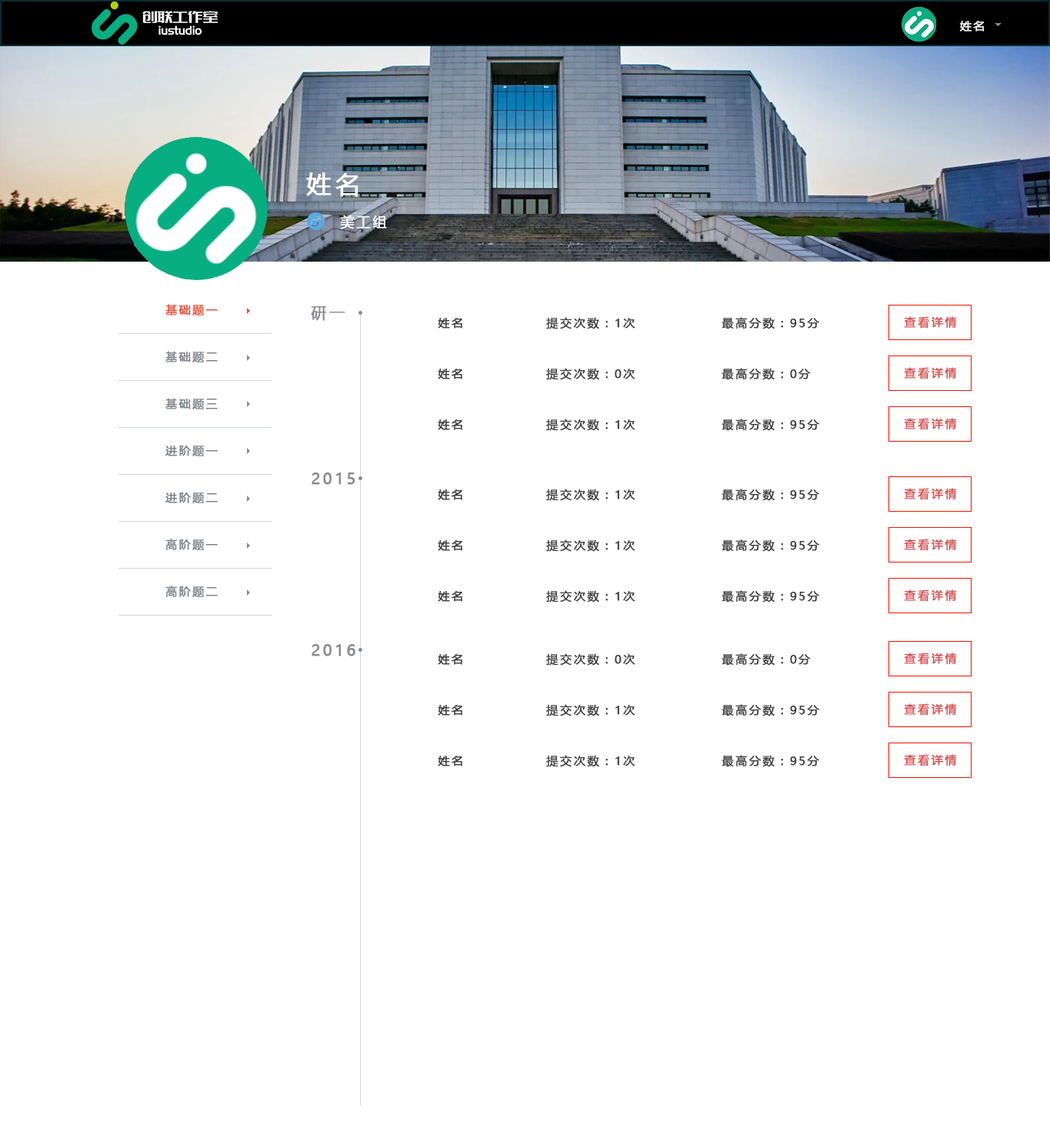
<style>
.page{position:relative;width:1050px;height:1135px;background:#ffffff}
.page>*{position:absolute;margin:0}
.t1{font:11.5px "MicrosoftYaHei";letter-spacing:0.14em;color:#eaeaea;font-weight:bold}
.t2{font:24.6px "MicrosoftYaHei";letter-spacing:0.14em;color:#ffffff;font-weight:bold}
.t3{font:13.9px "MicrosoftYaHei";letter-spacing:0.14em;color:#ffffff;font-weight:bold}
.t4{font:11.5px/47px "MicrosoftYaHei";letter-spacing:0.14em;color:#7f8489;font-weight:bold}
.t5{font:11.5px/47px "MicrosoftYaHei";letter-spacing:0.14em;color:#eb4f38;font-weight:bold}
.t6{font:15.4px "MicrosoftYaHei";letter-spacing:0.15em;color:#8a8c8f;font-weight:bold}
.t7{font:11.5px "MicrosoftYaHei";letter-spacing:0.15em;color:#414141;font-weight:bold}
.t8{font:11.5px "MicrosoftYaHei";letter-spacing:0.15em;color:#d85050;font-weight:bold}
</style>
<div class="page">
<p class="t1" style="left:960px;top:21px;width:25px;height:11px">姓名</p>
<p class="t2" style="left:306px;top:172px;width:53px;height:25px">姓名</p>
<p class="t3" style="left:340px;top:215px;width:47px;height:14px">美工组</p>
<p class="t4" style="left:165px;top:304px;width:53px;height:294px"><span class="t5">基础题一<br></span>基础题二<br>基础题三<br>进阶题一<br>进阶题二<br>高阶题一<br>高阶题二</p>
<p class="t6" style="left:311px;top:306px;width:35px;height:15px">研一</p>
<p class="t7" style="left:438px;top:318px;width:25px;height:11px">姓名</p>
<p class="t7" style="left:546px;top:317px;width:90px;height:12px">提交次数：1次</p>
<p class="t7" style="left:722px;top:317px;width:98px;height:12px">最高分数：95分</p>
<p class="t8" style="left:904px;top:316px;width:53px;height:13px">查看详情</p>
<p class="t7" style="left:438px;top:369px;width:25px;height:10px">姓名</p>
<p class="t7" style="left:546px;top:368px;width:90px;height:12px">提交次数：0次</p>
<p class="t7" style="left:722px;top:368px;width:89px;height:12px">最高分数：0分</p>
<p class="t8" style="left:904px;top:367px;width:53px;height:12px">查看详情</p>
<p class="t7" style="left:438px;top:419px;width:25px;height:11px">姓名</p>
<p class="t7" style="left:546px;top:419px;width:90px;height:12px">提交次数：1次</p>
<p class="t7" style="left:722px;top:419px;width:98px;height:12px">最高分数：95分</p>
<p class="t8" style="left:904px;top:418px;width:53px;height:12px">查看详情</p>
<p class="t6" style="left:312px;top:473px;width:44px;height:12px">2015</p>
<p class="t7" style="left:438px;top:489px;width:25px;height:11px">姓名</p>
<p class="t7" style="left:546px;top:489px;width:90px;height:12px">提交次数：1次</p>
<p class="t7" style="left:722px;top:489px;width:98px;height:12px">最高分数：95分</p>
<p class="t8" style="left:904px;top:488px;width:53px;height:12px">查看详情</p>
<p class="t7" style="left:438px;top:540px;width:25px;height:11px">姓名</p>
<p class="t7" style="left:546px;top:539px;width:90px;height:13px">提交次数：1次</p>
<p class="t7" style="left:722px;top:539px;width:98px;height:13px">最高分数：95分</p>
<p class="t8" style="left:904px;top:539px;width:53px;height:12px">查看详情</p>
<p class="t7" style="left:438px;top:591px;width:25px;height:11px">姓名</p>
<p class="t7" style="left:546px;top:590px;width:90px;height:13px">提交次数：1次</p>
<p class="t7" style="left:722px;top:590px;width:98px;height:13px">最高分数：95分</p>
<p class="t8" style="left:904px;top:589px;width:53px;height:13px">查看详情</p>
<p class="t6" style="left:312px;top:644px;width:44px;height:12px">2016</p>
<p class="t7" style="left:546px;top:653px;width:90px;height:13px">提交次数：0次</p>
<p class="t7" style="left:722px;top:653px;width:89px;height:13px">最高分数：0分</p>
<p class="t8" style="left:904px;top:653px;width:53px;height:12px">查看详情</p>
<p class="t7" style="left:438px;top:654px;width:25px;height:11px">姓名</p>
<p class="t7" style="left:438px;top:705px;width:25px;height:11px">姓名</p>
<p class="t7" style="left:546px;top:704px;width:90px;height:12px">提交次数：1次</p>
<p class="t7" style="left:722px;top:704px;width:98px;height:12px">最高分数：95分</p>
<p class="t8" style="left:904px;top:703px;width:53px;height:13px">查看详情</p>
<p class="t7" style="left:438px;top:756px;width:25px;height:11px">姓名</p>
<p class="t7" style="left:546px;top:755px;width:90px;height:12px">提交次数：1次</p>
<p class="t7" style="left:722px;top:755px;width:98px;height:12px">最高分数：95分</p>
<p class="t8" style="left:904px;top:754px;width:53px;height:13px">查看详情</p>
</div>
